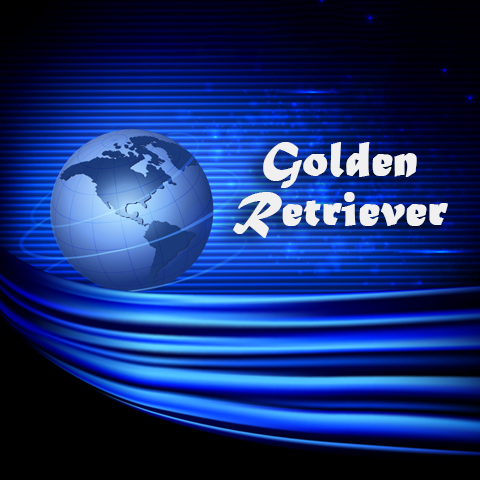
<style>
.page{position:relative;width:480px;height:480px}
.page>*{position:absolute;margin:0}
.t1{font:50px/50px "MaturaMTScriptCapitals";color:#f0f0f0;font-weight:bold}
</style>
<div class="page">
<p class="t1" style="left:233px;top:142px;width:215px;height:96px;text-align:center">Golden<br>Retriever</p>
</div>
